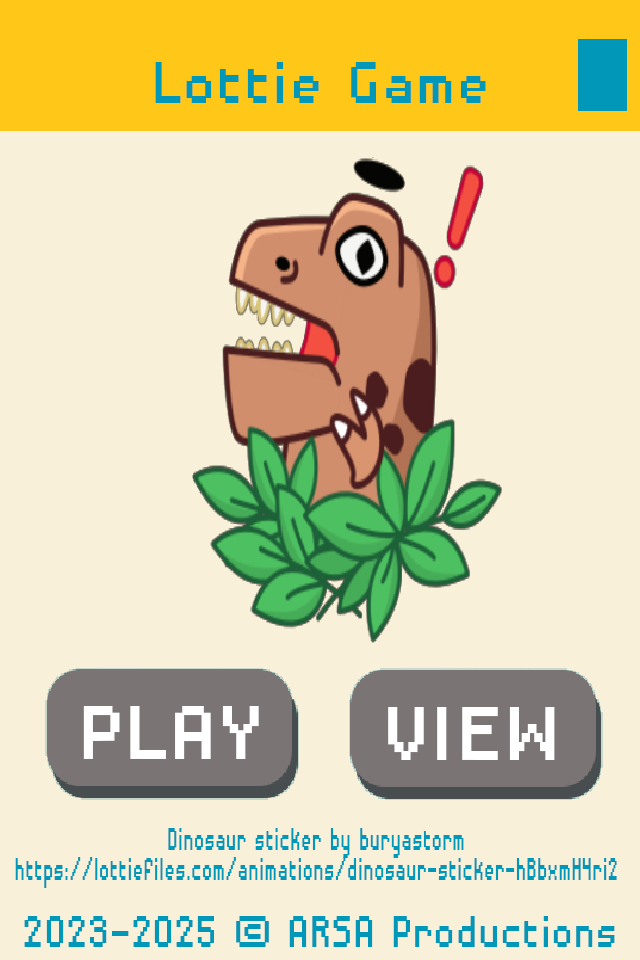
<style>
.page{position:relative;width:640px;height:960px;background:#f8f0d9}
.page>*{position:absolute;margin:0}
.t1{font:76.6px "DisposableDroidBB";color:#0097b8;scale:0.91 1}
.t2{font:100.3px "DisposableDroidBB";color:#ffffff}
.t3{font:42.3px/30px "DisposableDroidBB";color:#0097b8;scale:0.52 1}
.t4{font:57.6px "DisposableDroidBB";color:#0097b8;scale:0.79 1}
</style>
<div class="page">
<p class="t1" style="left:155px;top:62px;width:331px;height:41px">Lottie Game</p>
<p class="t2" style="left:83px;top:706px;width:176px;height:53px">PLAY</p>
<p class="t2" style="left:388px;top:707px;width:167px;height:53px">VIEW</p>
<p class="t3" style="left:15px;top:828px;width:602px;height:60px;text-align:center">Dinosaur sticker by buryastorm<br>https://lottiefiles.com/animations/dinosaur-sticker-hBbxmH4ri2</p>
<p class="t4" style="left:24px;top:916px;width:591px;height:31px">2023-2025 (c) ARSA Productions</p>
</div>
